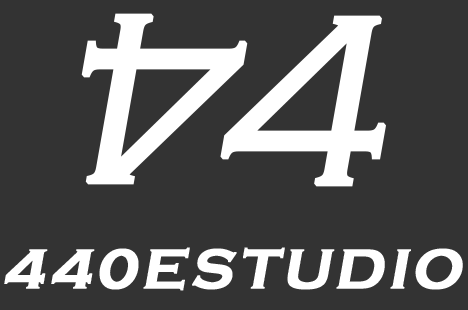
<style>
.page{position:relative;width:468px;height:310px;background:#333333}
.page>*{position:absolute;margin:0}
.t1{font:249.2px "CopperplateGothic-Light";letter-spacing:0.05em;color:#ffffff;font-weight:bold;font-style:italic}
.t2{font:58.3px "CopperplateGothic-Bold";letter-spacing:0.05em;color:#ffffff;font-weight:bold;font-style:italic}
</style>
<div class="page">
<p class="t1" style="left:81px;top:13px;width:167px;height:172px;rotate:180deg">4</p>
<p class="t1" style="left:220px;top:15px;width:166px;height:172px">4</p>
<p class="t2" style="left:4px;top:247px;width:459px;height:44px">440ESTUDIO</p>
</div>
